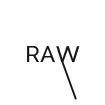
<style>
.page{position:relative;width:105px;height:105px;background:#ffffff}
.page>*{position:absolute;margin:0}
.t1{font:22px "Raleway-Medium";letter-spacing:0.04em;color:#151515}
</style>
<div class="page">
<p class="t1" style="left:27px;top:46px;width:53px;height:17px">RAW</p>
</div>
